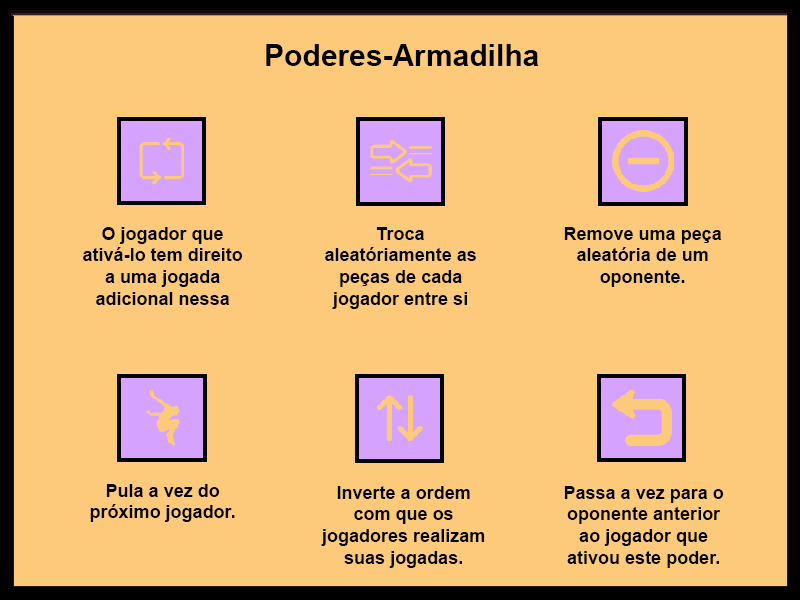
<style>
.page{position:relative;width:800px;height:600px;background:#fdca7c}
.page>*{position:absolute;margin:0}
.t1{font:30px "Arial-BoldMT";color:#000000}
.t2{font:18px "Arial-BoldMT";color:#000000}
</style>
<div class="page">
<p class="t1" style="left:266px;top:44px;width:273px;height:22px">Poderes-Armadilha</p>
<p class="t2" style="left:83px;top:227px;width:160px;height:78px;text-align:center">O jogador que ativá-lo tem direito a uma jogada adicional nessa rodada.</p>
<p class="t2" style="left:325px;top:227px;width:151px;height:82px;text-align:center">Troca aleatóriamente as peças de cada jogador entre si</p>
<p class="t2" style="left:564px;top:227px;width:158px;height:60px;text-align:center">Remove uma peça aleatória de um oponente.</p>
<p class="t2" style="left:90px;top:484px;width:145px;height:38px;text-align:center">Pula a vez do próximo jogador.</p>
<p class="t2" style="left:321px;top:486px;width:164px;height:82px;text-align:center">Inverte a ordem com que os jogadores realizam suas jogadas.</p>
<p class="t2" style="left:564px;top:486px;width:160px;height:82px;text-align:center">Passa a vez para o oponente anterior ao jogador que ativou este poder.</p>
</div>
